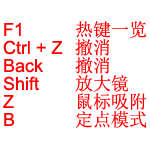
<style>
.page{position:relative;width:150px;height:150px;background:#ffffff}
.page>*{position:absolute;margin:0}
.t1{font:18px/18px "ArialMT";color:#ff0000}
.t2{font:18px/18px "SimSun";color:#ff0000}
</style>
<div class="page">
<p class="t1" style="left:3px;top:21px;width:144px;height:107px">F1  <span class="t2">热键一览</span><br>Ctrl + Z  <span class="t2">撤消</span><br>Back <span class="t2">撤消</span><br>Shift  <span class="t2">放大镜</span><br>Z  <span class="t2">鼠标吸附</span><br>B  <span class="t2">定点模式</span></p>
</div>
